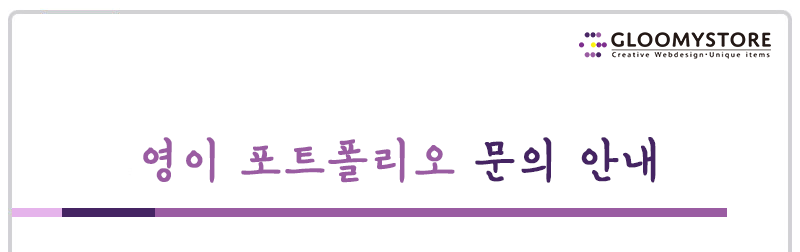
<style>
.page{position:relative;width:800px;height:252px;background:#ffffff}
.page>*{position:absolute;margin:0}
.t1{font:47px "KoreanEMPJ-B";letter-spacing:0.03em;color:#9a5ca2;font-weight:bold}
.t2{font:47px "KoreanEMPJ-B";letter-spacing:0.03em;color:#452463;font-weight:bold}
</style>
<div class="page">
<p class="t1" style="left:143px;top:137px;width:513px;height:46px">영이 포트폴리오<span class="t2"> 문의 안내</span></p>
</div>
